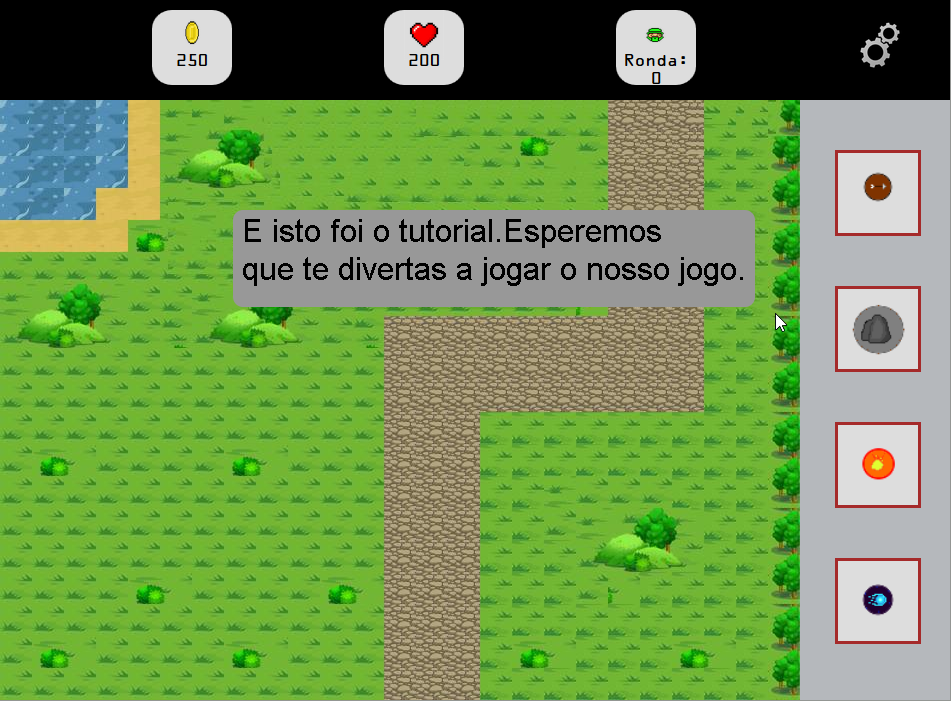
<style>
.page{position:relative;width:951px;height:701px}
.page>*{position:absolute;margin:0}
.t1{font:32px "ArialMT";color:#000000}
</style>
<div class="page">
<p class="t1" style="left:243px;top:219px;width:500px;height:67px">E isto foi o tutorial.Esperemos<br>que te divertas a jogar o nosso jogo.</p>
</div>
